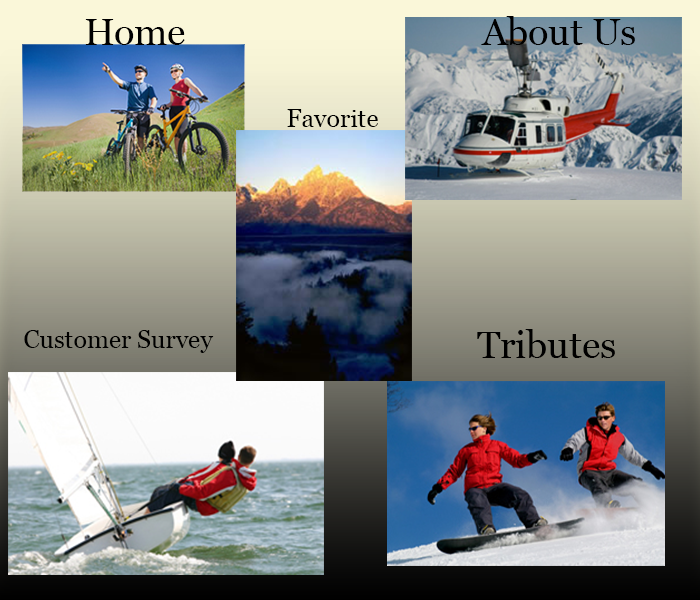
<style>
.page{position:relative;width:700px;height:600px}
.page>*{position:absolute;margin:0}
.t1{font:37.5px "Georgia";color:#000000}
.t2{font:25px "Georgia";color:#000000}
</style>
<div class="page">
<p class="t1" style="left:481px;top:16px;width:154px;height:29px">About Us</p>
<p class="t1" style="left:85px;top:19px;width:100px;height:26px">Home</p>
<p class="t2" style="left:287px;top:109px;width:91px;height:18px">Favorite</p>
<p class="t1" style="left:477px;top:329px;width:138px;height:29px">Tributes</p>
<p class="t2" style="left:24px;top:330px;width:190px;height:23px">Customer Survey</p>
</div>
